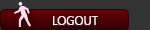
<style>
.page{position:relative;width:150px;height:30px;background:#333333}
.page>*{position:absolute;margin:0}
.t1{font:12px "NirmalaUI";color:#fff9fc}
</style>
<div class="page">
<p class="t1" style="left:53px;top:16px;width:45px;height:9px">LOGOUT</p>
</div>
